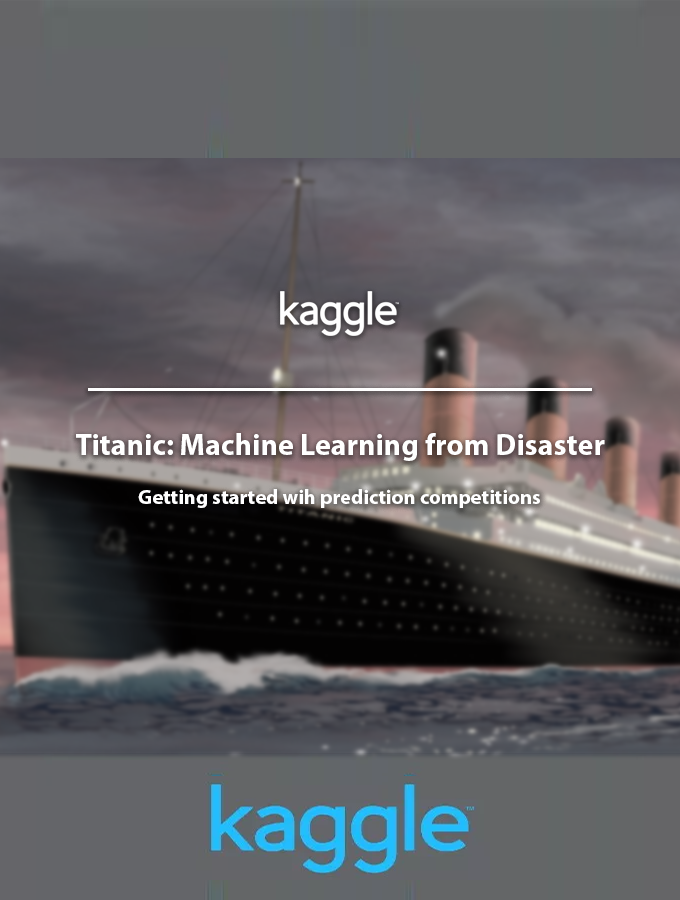
<style>
.page{position:relative;width:680px;height:900px}
.page>*{position:absolute;margin:0}
.t1{font:30px "MyriadPro-Bold";color:#ffffff}
.t2{font:20.6px "MyriadPro-Bold";color:#ffffff}
</style>
<div class="page">
<p class="t1" style="left:76px;top:433px;width:529px;height:28px">Titanic: Machine Learning from Disaster</p>
<p class="t2" style="left:138px;top:489px;width:402px;height:19px">Getting started wih prediction competitions</p>
</div>
